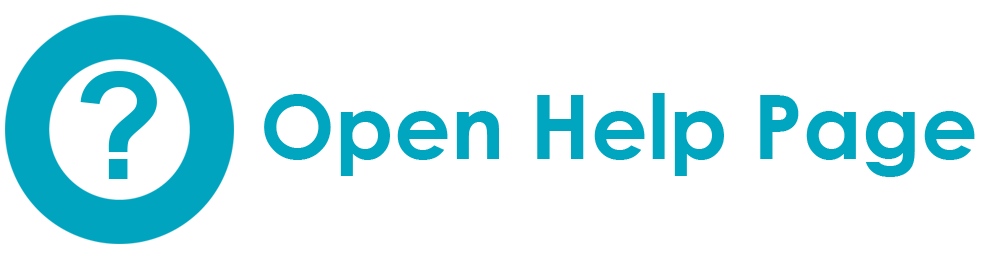
<style>
.page{position:relative;width:986px;height:256px;background:#ffffff}
.page>*{position:absolute;margin:0}
.t1{font:148.2px "Arial-BoldMT";color:#00a6c0}
.t2{font:89.3px "CenturyGothic-Bold";color:#00a6c0}
</style>
<div class="page">
<p class="t1" style="left:80px;top:71px;width:77px;height:108px">?</p>
<p class="t2" style="left:264px;top:93px;width:711px;height:84px">Open Help Page</p>
</div>
